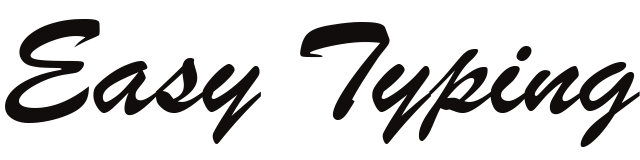
<style>
.page{position:relative;width:640px;height:160px;background:#ffffff}
.page>*{position:absolute;margin:0}
.t1{font:138.7px "BrushScriptMT";letter-spacing:-0.005em;color:#110d0d;scale:1.1 1}
</style>
<div class="page">
<p class="t1" style="left:5px;top:19px;width:635px;height:128px">Easy Typing</p>
</div>
